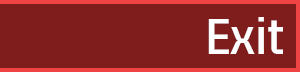
<style>
.page{position:relative;width:300px;height:72px;background:#7f1d1d}
.page>*{position:absolute;margin:0}
.t1{font:44px "KdamThmorPro-Regular";color:#fefefe}
</style>
<div class="page">
<p class="t1" style="left:208px;top:17px;width:75px;height:37px">Exit</p>
</div>
